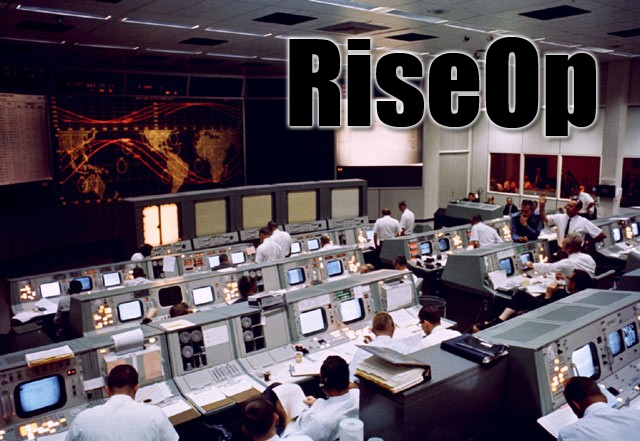
<style>
.page{position:relative;width:640px;height:441px}
.page>*{position:absolute;margin:0}
.t1{font:110px "Impact";color:#000000}
</style>
<div class="page">
<p class="t1" style="left:289px;top:37px;width:307px;height:99px">RiseOp</p>
</div>
